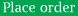
<style>
.page{position:relative;width:78px;height:16px;background:#01a54f}
.page>*{position:absolute;margin:0}
.t1{font:13.4px "LucidaBright";color:#ffffff}
</style>
<div class="page">
<p class="t1" style="left:3px;top:1px;width:72px;height:12px">Place order</p>
</div>
